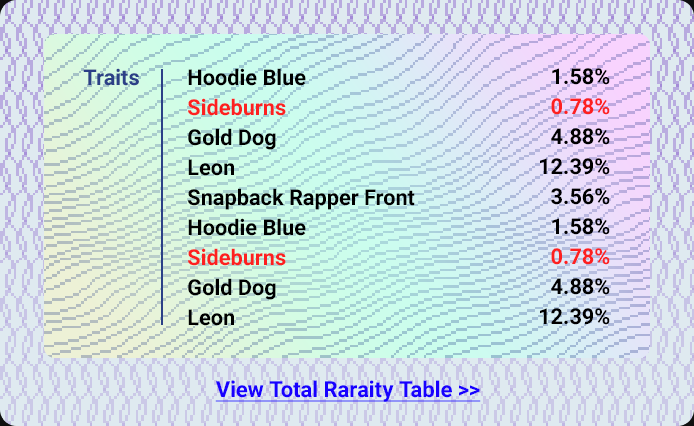
<style>
.page{position:relative;width:694px;height:426px;background:#dfeaf0}
.page>*{position:absolute;margin:0}
.t1{font:21.7px "Roboto-Bold";color:#2c4087}
.t2{font:21.7px/30px "Roboto-Bold";color:#000000}
.t3{font:21.7px/30px "Roboto-Bold";color:#fd2020}
.t4{font:22px "Roboto-Bold";color:#1800ff;text-decoration:underline}
</style>
<div class="page">
<p class="t1" style="left:83px;top:68px;width:56px;height:18px">Traits</p>
<p class="t2" style="left:188px;top:68px;width:227px;height:258px;text-align:right">Hoodie Blue<br><span class="t3">Sideburns<br></span>Gold Dog<br>Leon<br>Snapback Rapper Front<br>Hoodie Blue<br><span class="t3">Sideburns<br></span>Gold Dog<br>Leon</p>
<p class="t2" style="left:540px;top:68px;width:70px;height:257px">1.58%<br><span class="t3">0.78%<br></span>4.88%<br>12.39%<br>3.56%<br>1.58%<br><span class="t3">0.78%<br></span>4.88%<br>12.39%</p>
<p class="t4" style="left:215px;top:380px;width:266px;height:22px">View Total Raraity Table &gt;&gt;</p>
</div>
